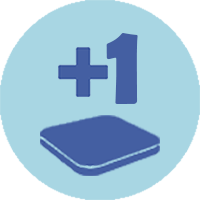
<style>
.page{position:relative;width:200px;height:200px;background:#a8d6e3}
.page>*{position:absolute;margin:0}
.t1{font:116.7px "BerlinSansFBDemi-Bold";color:#445fa2}
</style>
<div class="page">
<p class="t1" style="left:106px;top:33px;width:32px;height:71px">1</p>
</div>
